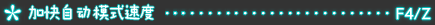
<style>
.page{position:relative;width:435px;height:25px;background:#333333}
.page>*{position:absolute;margin:0}
.t1{font:18px "¢è?";color:#ffffff}
</style>
<div class="page">
<p class="t1" style="left:29px;top:4px;width:125px;height:16px">加快自动模式速度</p>
</div>
